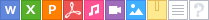
<style>
.page{position:relative;width:209px;height:20px;background:#ffffff}
.page>*{position:absolute;margin:0}
.t1{font:10.3px "AdobeHeitiStd-Regular";letter-spacing:0.16em;color:#ffffff;scale:1.17 1}
.t2{font:11.7px "AdobeHeitiStd-Regular";letter-spacing:0.16em;color:#ffffff;scale:1.38 1}
.t3{font:10.6px "AdobeHeitiStd-Regular";letter-spacing:0.16em;color:#ffffff;scale:1.32 1}
</style>
<div class="page">
<p class="t1" style="left:5px;top:6px;width:11px;height:8px">W</p>
<p class="t2" style="left:26px;top:5px;width:10px;height:9px">X</p>
<p class="t3" style="left:49px;top:5px;width:7px;height:9px">P</p>
</div>
